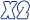
<style>
.page{position:relative;width:30px;height:20px;background:#ffffff}
.page>*{position:absolute;margin:0}
.t1{font:24px "Bauhaus93";letter-spacing:-0.08em;color:#ffffff;font-style:italic;scale:0.93 1}
</style>
<div class="page">
<p class="t1" style="left:1px;top:1px;width:28px;height:18px">X 2</p>
</div>
